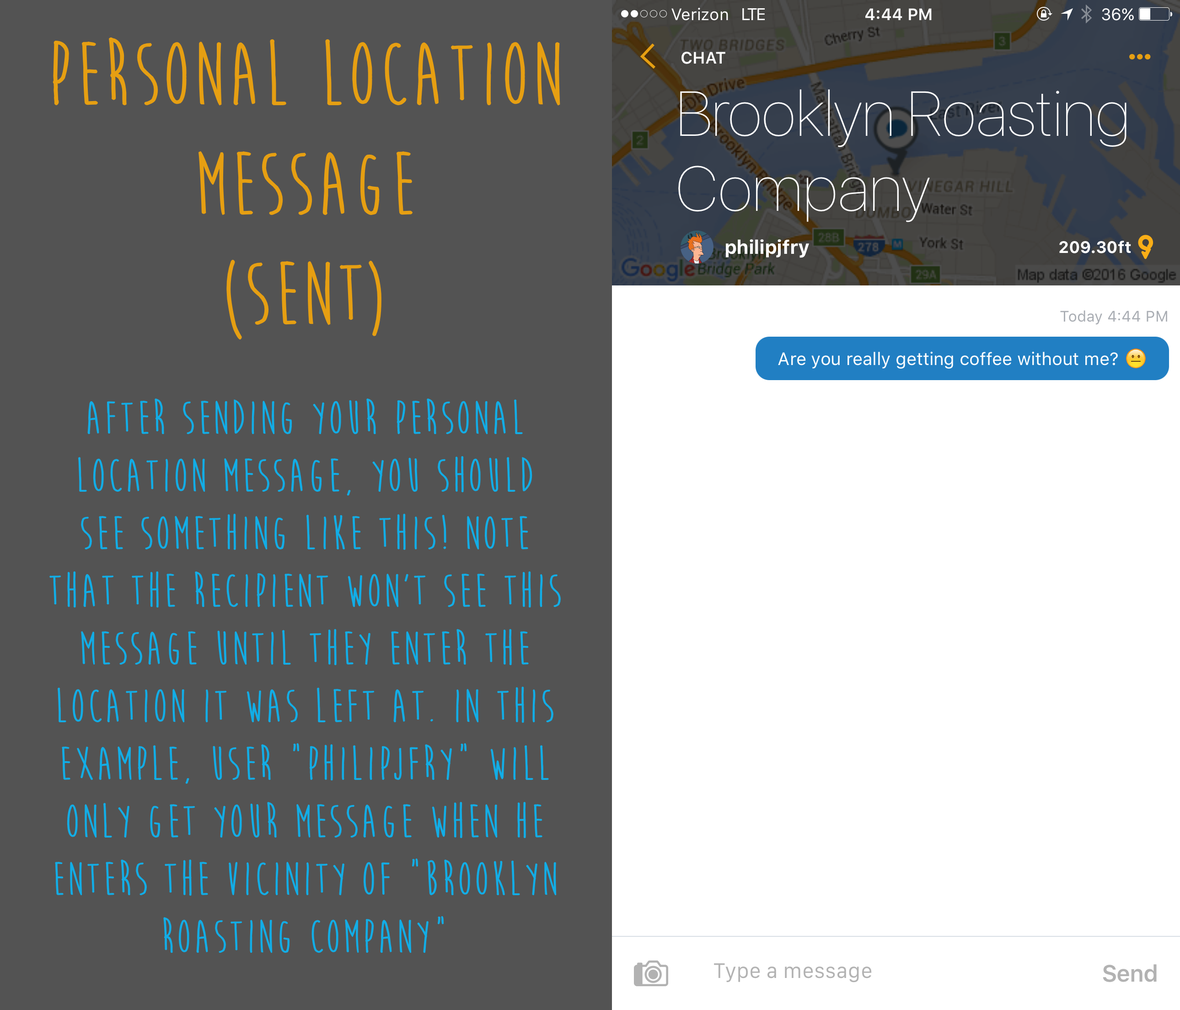
<style>
.page{position:relative;width:1180px;height:1010px;background:#535353}
.page>*{position:absolute;margin:0}
.t1{font:91.5px "MoonFlowerBold";letter-spacing:0.037em;color:#e69f12}
.t2{font:48px "MoonFlowerBold";letter-spacing:0.037em;color:#12ade6}
</style>
<div class="page">
<p class="t1" style="left:53px;top:37px;width:507px;height:303px;text-align:center">PERSONAL LOCATION MESSAGE <br>(SENT)</p>
<p class="t2" style="left:49px;top:398px;width:512px;height:555px;text-align:center">AFTER SENDING YOUR PERSONAL LOCATION MESSAGE, YOU SHOULD SEE SOMETHING LIKE THIS! Note that the recipient won’t see this message until they enter the location it was left at. In this example, user “philipjfry” will only get your message when he enters the vicinity of “brooklyn roasting company”</p>
</div>
